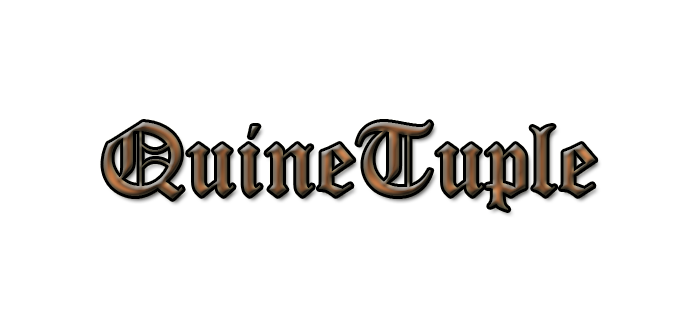
<style>
.page{position:relative;width:688px;height:325px;background:#ffffff}
.page>*{position:absolute;margin:0}
.t1{font:100px "OldEnglishTextMT"}
</style>
<div class="page">
<p class="t1" style="left:103px;top:122px;width:493px;height:88px">QuineTuple</p>
</div>
